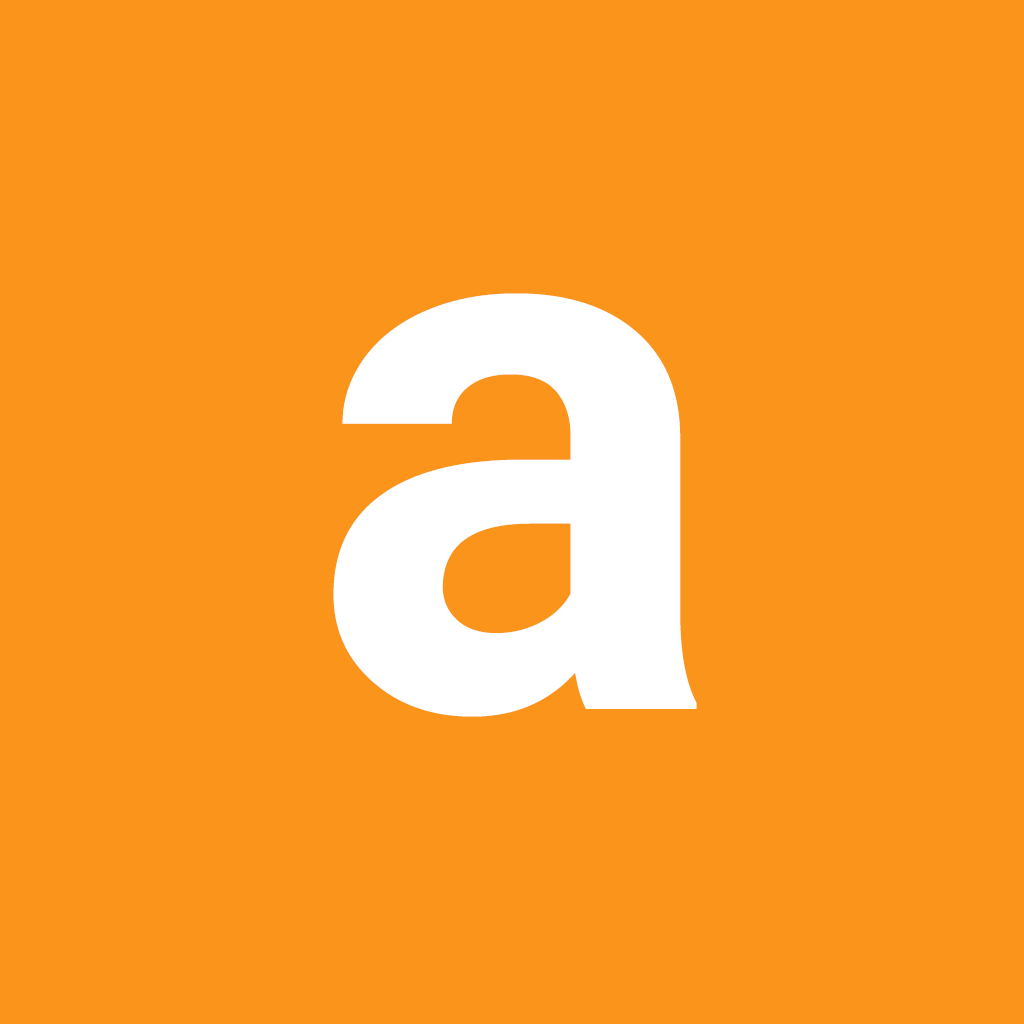
<style>
.page{position:relative;width:1024px;height:1024px;background:#fa941a}
.page>*{position:absolute;margin:0}
.t1{font:772px "Roboto-Bold";color:#ffffff}
</style>
<div class="page">
<p class="t1" style="left:333px;top:293px;width:364px;height:424px">a</p>
</div>
